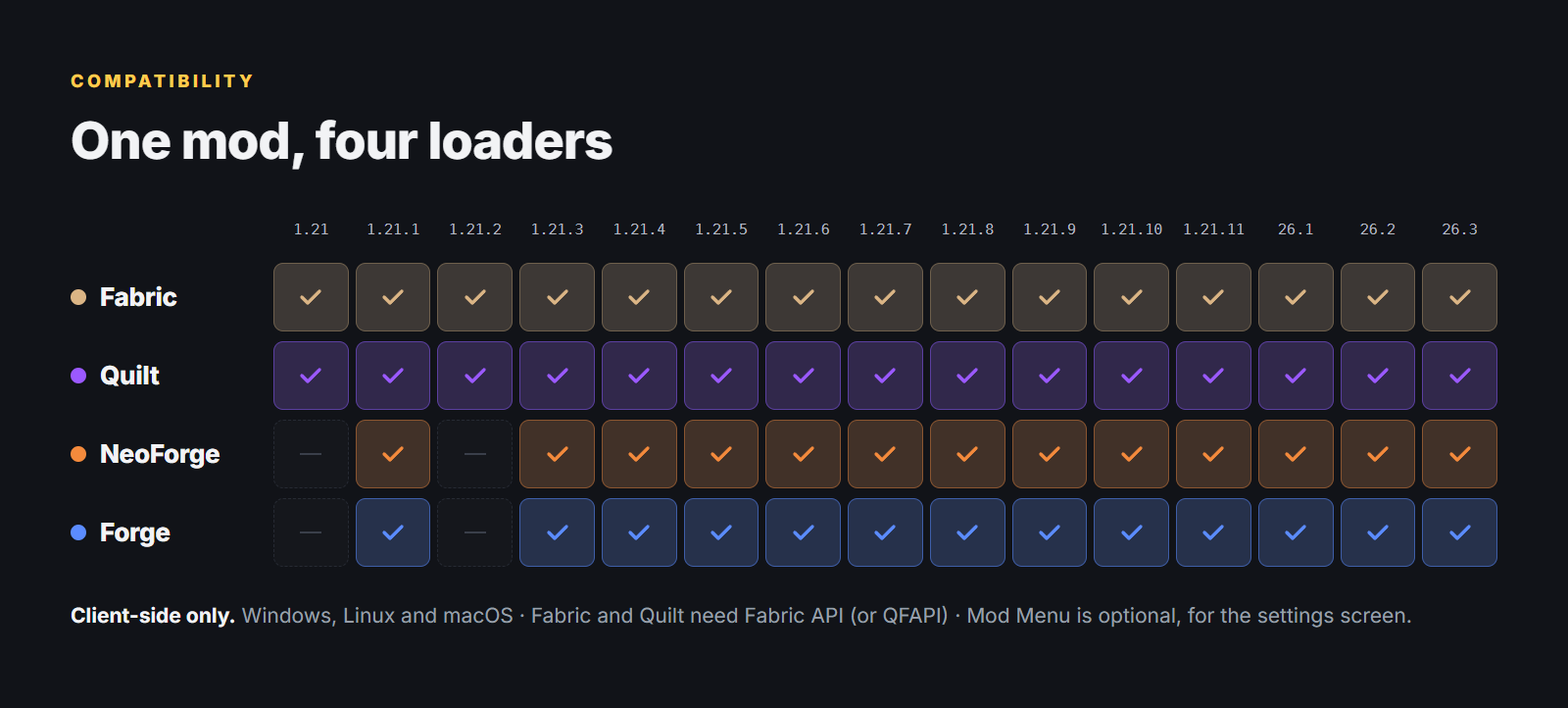
<style>
.page{position:relative;width:1568px;height:708px;background:#111318}
.page>*{position:absolute;margin:0}
.t1{font:17.6px "Inter-ExtraBold";letter-spacing:0.2em;color:#ffcc4d}
.t2{font:51px "Inter-ExtraBold";letter-spacing:-0.015em;color:#f2f3f5}
.t3{font:14.7px "DejaVuSansMono";color:#b4b8c1}
.t4{font:25.5px "Inter-ExtraBold";letter-spacing:-0.012em;color:#f2f3f5}
.t5{font:20.6px "Inter-Regular";color:#9aa0ab}
.t6{font:20.6px "Inter-Bold";color:#f2f3f5}
</style>
<div class="page">
<p class="t1" style="left:71px;top:74px;width:182px;height:14px">COMPATIBILITY</p>
<p class="t2" style="left:72px;top:120px;width:540px;height:50px">One mod, four loaders</p>
<p class="t3" style="left:294px;top:223px;width:34px;height:11px">1.21</p>
<p class="t3" style="left:368px;top:223px;width:51px;height:11px">1.21.1</p>
<p class="t3" style="left:450px;top:223px;width:52px;height:11px">1.21.2</p>
<p class="t3" style="left:532px;top:223px;width:51px;height:11px">1.21.3</p>
<p class="t3" style="left:613px;top:223px;width:52px;height:11px">1.21.4</p>
<p class="t3" style="left:696px;top:223px;width:52px;height:11px">1.21.5</p>
<p class="t3" style="left:778px;top:223px;width:52px;height:11px">1.21.6</p>
<p class="t3" style="left:860px;top:223px;width:51px;height:11px">1.21.7</p>
<p class="t3" style="left:942px;top:223px;width:52px;height:11px">1.21.8</p>
<p class="t3" style="left:1024px;top:223px;width:52px;height:11px">1.21.9</p>
<p class="t3" style="left:1102px;top:223px;width:60px;height:11px">1.21.10</p>
<p class="t3" style="left:1184px;top:223px;width:61px;height:11px">1.21.11</p>
<p class="t3" style="left:1278px;top:223px;width:35px;height:11px">26.1</p>
<p class="t3" style="left:1360px;top:223px;width:36px;height:11px">26.2</p>
<p class="t3" style="left:1443px;top:223px;width:34px;height:11px">26.3</p>
<p class="t4" style="left:101px;top:285px;width:76px;height:22px">Fabric</p>
<p class="t4" style="left:100px;top:364px;width:60px;height:22px">Quilt</p>
<p class="t4" style="left:101px;top:444px;width:119px;height:24px">NeoForge</p>
<p class="t4" style="left:101px;top:522px;width:70px;height:25px">Forge</p>
<p class="t5" style="left:71px;top:605px;width:1340px;height:22px"><span class="t6">Client-side only.</span> Windows, Linux and macOS · Fabric and Quilt need Fabric API (or QFAPI) · Mod Menu is optional, for the settings screen.</p>
</div>
